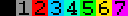
<style>
.page{position:relative;width:128px;height:16px;background:#000000}
.page>*{position:absolute;margin:0}
.t1{font:22.9px "Courier";color:#000000;scale:1.3 1}
</style>
<div class="page">
<p class="t1" style="left:19px;top:1px;width:10px;height:14px">1</p>
<p class="t1" style="left:35px;top:1px;width:10px;height:14px">2</p>
<p class="t1" style="left:51px;top:1px;width:10px;height:14px">3</p>
<p class="t1" style="left:67px;top:1px;width:10px;height:14px">4</p>
<p class="t1" style="left:83px;top:1px;width:10px;height:14px">5</p>
<p class="t1" style="left:99px;top:1px;width:10px;height:14px">6</p>
<p class="t1" style="left:115px;top:1px;width:10px;height:14px">7</p>
</div>
